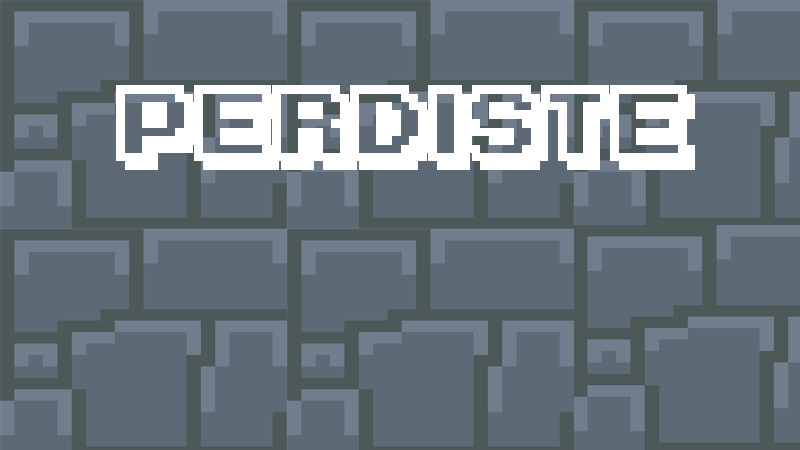
<style>
.page{position:relative;width:800px;height:450px;background:#5d6975}
.page>*{position:absolute;margin:0}
.t1{font:86.7px "KarmaticArcade";color:#ffffff}
</style>
<div class="page">
<p class="t1" style="left:116px;top:85px;width:579px;height:85px">Perdiste</p>
</div>
